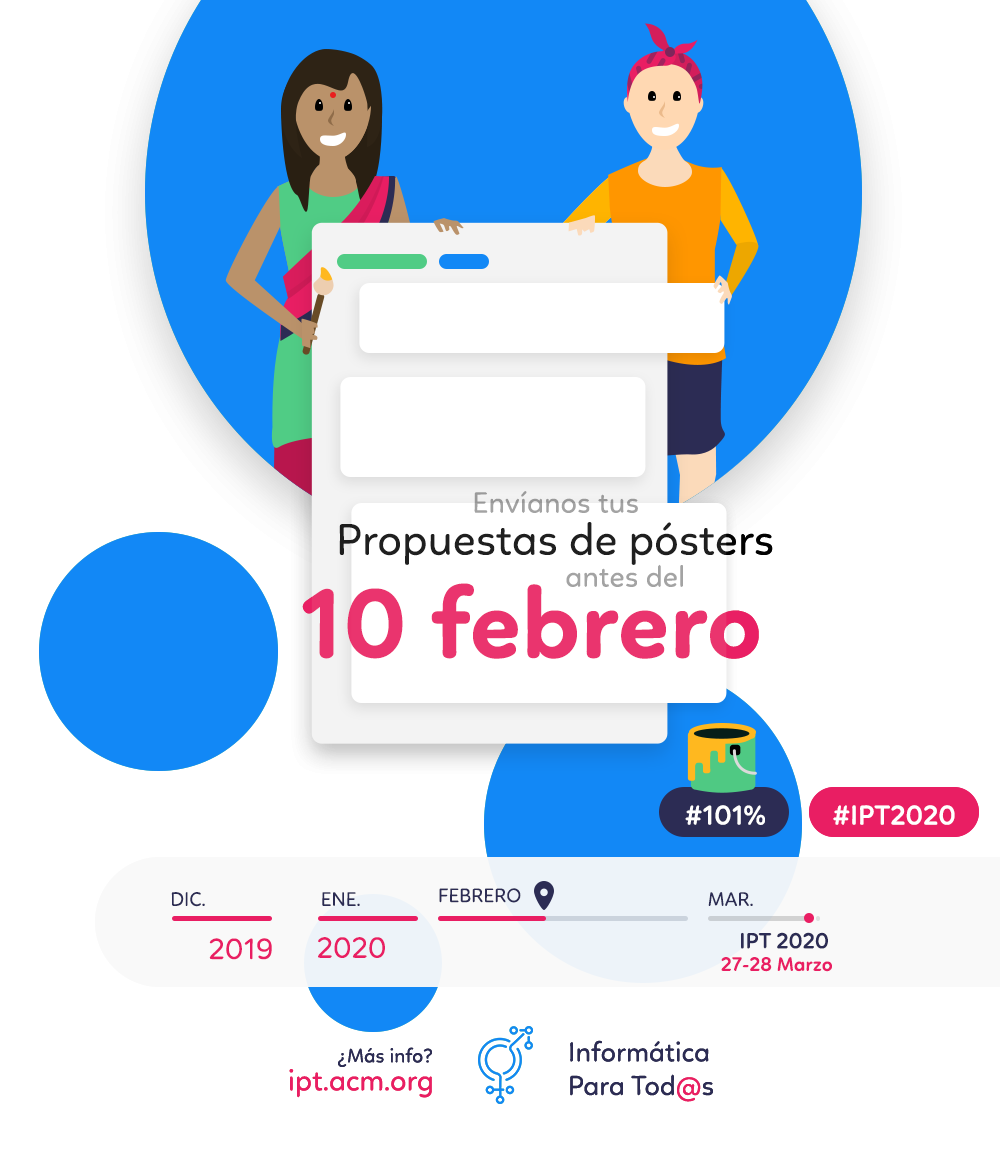
<style>
.page{position:relative;width:1000px;height:1150px;background:#ffffff}
.page>*{position:absolute;margin:0}
.t1{font:30px "Linotte-Regular";color:#a3a3a3}
.t2{font:45px "Linotte-Regular";color:#1f1f1f}
.t3{font:101px "Linotte-Bold";color:#e91e63}
.t4{font:28px "Linotte-SemiBold";color:#ffffff}
.t5{font:20px "Linotte-Regular";color:#2c2c54;text-transform:uppercase}
.t6{font:30px "Linotte-Regular";color:#e91e63}
.t7{font:22.5px "Linotte-SemiBold";color:#2c2c54}
.t8{font:20px "Linotte-SemiBold";color:#e91e63}
.t9{font:20px "Linotte-Regular";color:#2c2c54}
.t10{font:28px "Linotte-Regular";color:#2c2c54}
.t11{font:28px "Linotte-Regular";color:#e91e63}
</style>
<div class="page">
<p class="t1" style="left:474px;top:491px;width:164px;height:22px">Envíanos tus</p>
<p class="t1" style="left:474px;top:491px;width:164px;height:22px">Envíanos tus</p>
<p class="t2" style="left:339px;top:522px;width:434px;height:43px">Propuestas de pósters</p>
<p class="t2" style="left:339px;top:522px;width:434px;height:43px">Propuestas de pósters</p>
<p class="t1" style="left:566px;top:564px;width:117px;height:23px">antes del</p>
<p class="t1" style="left:566px;top:564px;width:117px;height:23px">antes del</p>
<p class="t3" style="left:302px;top:583px;width:457px;height:76px;opacity:0.95">10 febrero</p>
<p class="t3" style="left:302px;top:583px;width:457px;height:76px;opacity:0.95">10 febrero</p>
<p class="t4" style="left:685px;top:805px;width:80px;height:20px">#101%</p>
<p class="t4" style="left:685px;top:805px;width:80px;height:20px">#101%</p>
<p class="t4" style="left:833px;top:805px;width:122px;height:20px">#IPT2020</p>
<p class="t4" style="left:833px;top:805px;width:122px;height:20px">#IPT2020</p>
<p class="t5" style="left:171px;top:892px;width:34px;height:15px">Dic.</p>
<p class="t5" style="left:171px;top:892px;width:34px;height:15px">Dic.</p>
<p class="t5" style="left:322px;top:892px;width:38px;height:14px">ENE.</p>
<p class="t5" style="left:322px;top:892px;width:38px;height:14px">ENE.</p>
<p class="t5" style="left:439px;top:888px;width:82px;height:15px">Febrero</p>
<p class="t5" style="left:439px;top:888px;width:82px;height:15px">Febrero</p>
<p class="t5" style="left:708px;top:892px;width:45px;height:14px">MAR.</p>
<p class="t5" style="left:708px;top:892px;width:45px;height:14px">MAR.</p>
<p class="t6" style="left:209px;top:938px;width:63px;height:22px">2019</p>
<p class="t6" style="left:209px;top:938px;width:63px;height:22px">2019</p>
<p class="t6" style="left:318px;top:937px;width:67px;height:21px">2020</p>
<p class="t6" style="left:318px;top:937px;width:67px;height:21px">2020</p>
<p class="t7" style="left:741px;top:932px;width:87px;height:17px">IPT 2020</p>
<p class="t7" style="left:741px;top:932px;width:87px;height:17px">IPT 2020</p>
<p class="t8" style="left:721px;top:957px;width:111px;height:15px">27-28 Marzo</p>
<p class="t8" style="left:721px;top:957px;width:111px;height:15px">27-28 Marzo</p>
<p class="t9" style="left:338px;top:1047px;width:94px;height:20px">¿Más info?</p>
<p class="t9" style="left:338px;top:1047px;width:94px;height:20px">¿Más info?</p>
<p class="t10" style="left:570px;top:1040px;width:143px;height:62px;text-align:right">Informática<br>Para Tod<span class="t11">@</span>s</p>
<p class="t10" style="left:570px;top:1040px;width:143px;height:62px;text-align:right">Informática<br>Para Tod<span class="t11">@</span>s</p>
<p class="t6" style="left:289px;top:1069px;width:143px;height:29px">ipt.acm.org</p>
<p class="t6" style="left:289px;top:1069px;width:143px;height:29px">ipt.acm.org</p>
</div>
